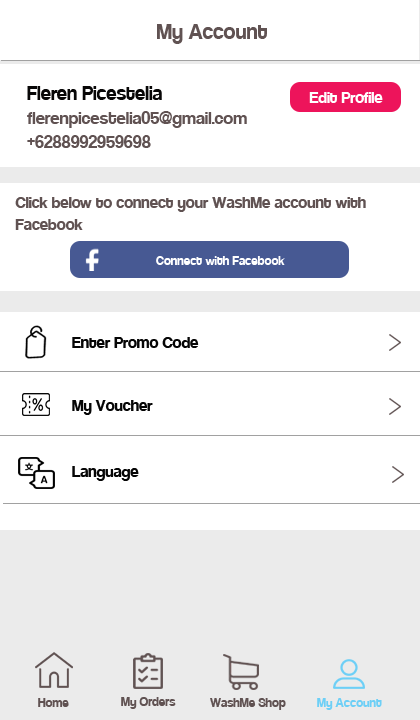
<style>
.page{position:relative;width:420px;height:720px;background:#ffffff}
.page>*{position:absolute;margin:0}
.t1{font:24px "Coolvetica-Regular";color:#605252}
.t2{font:20px "Coolvetica-Regular";color:#605252}
.t3{font:22px "Coolvetica-Regular";color:#080707}
.t4{font:18px "Coolvetica-Regular";color:#ffffff}
.t5{font:18px "Coolvetica-Regular";color:#605252}
.t6{font:14px "Coolvetica-Regular";color:#ffffff}
.t7{font:18px "Coolvetica-Regular";color:#060606}
.t8{font:14px "Coolvetica-Regular";color:#605252}
.t9{font:14px "Coolvetica-Regular";color:#6dcff6}
</style>
<div class="page">
<p class="t1" style="left:157px;top:24px;width:110px;height:20px">My Account</p>
<p class="t2" style="left:27px;top:86px;width:220px;height:62px"><span class="t3">Fleren Picestelia<br></span>flerenpicestelia05@gmail.com<br>+6288992959698</p>
<p class="t4" style="left:309px;top:92px;width:74px;height:11px">Edit Profile</p>
<p class="t5" style="left:15px;top:197px;width:351px;height:33px">Click below to connect your WashMe account with <br>Facebook</p>
<p class="t6" style="left:156px;top:256px;width:129px;height:9px">Connect with Facebook</p>
<p class="t7" style="left:72px;top:337px;width:127px;height:11px">Enter Promo Code</p>
<p class="t7" style="left:72px;top:400px;width:81px;height:15px">My Voucher</p>
<p class="t7" style="left:72px;top:466px;width:67px;height:15px">Language</p>
<p class="t8" style="left:38px;top:698px;width:31px;height:9px">Home</p>
<p class="t8" style="left:121px;top:697px;width:55px;height:12px">My Orders</p>
<p class="t8" style="left:210px;top:698px;width:76px;height:12px">WashMe Shop</p>
<p class="t9" style="left:317px;top:698px;width:65px;height:12px">My Account</p>
</div>
